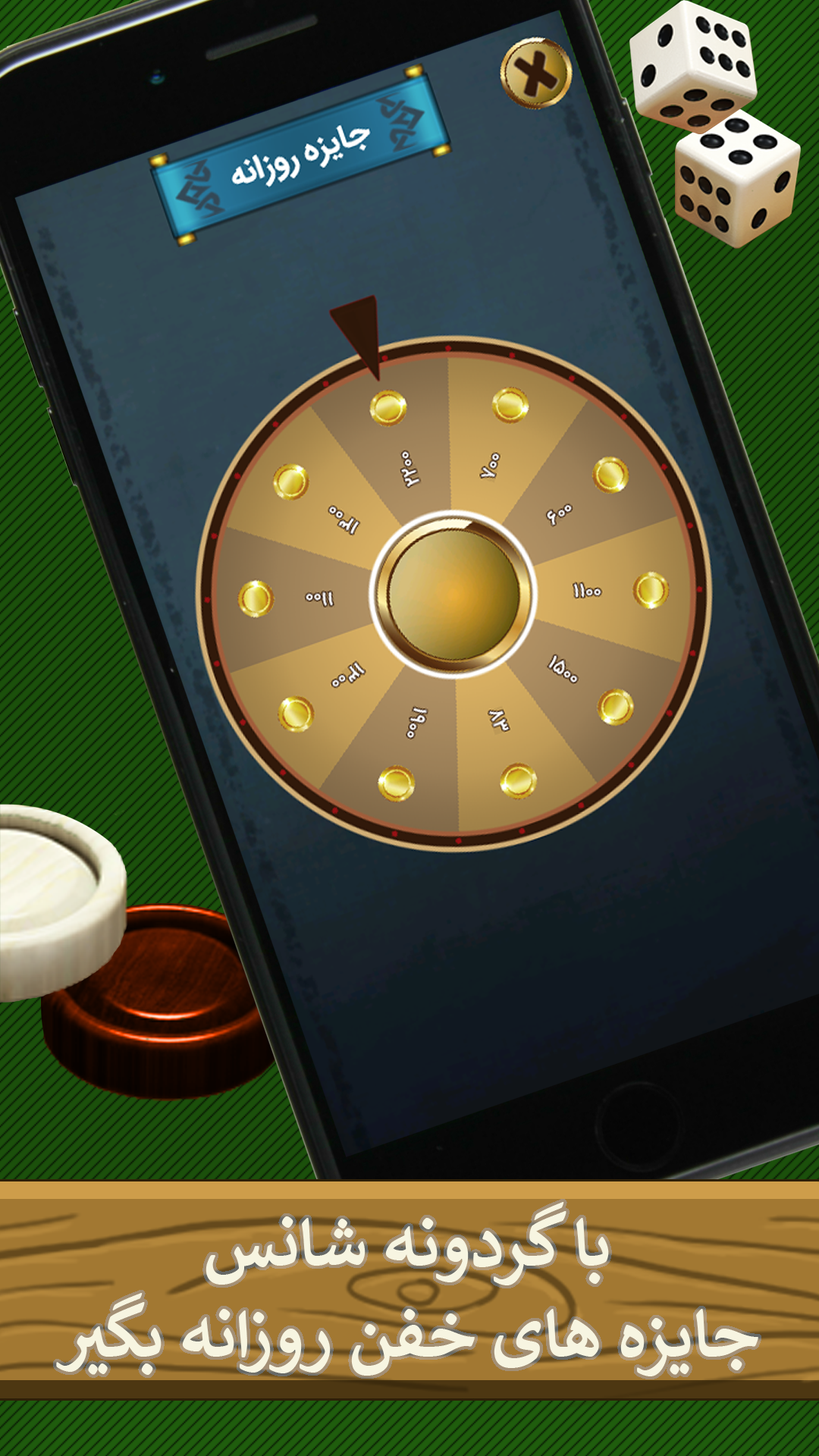
<style>
.page{position:relative;width:819px;height:1456px}
.page>*{position:absolute;margin:0}
.t1{font:75.8px "Calibri-Bold";color:#f7f5e1}
</style>
<div class="page">
<p class="t1" style="left:56px;top:1202px;width:702px;height:174px;text-align:center">با گردونه شانس<br>جایزه های خفن روزانه بگیر</p>
</div>
